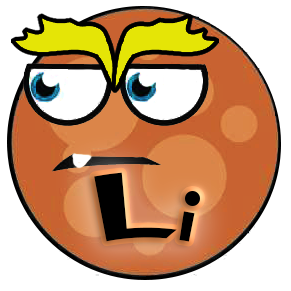
<style>
.page{position:relative;width:291px;height:291px;background:#ffffff}
.page>*{position:absolute;margin:0}
.t1{font:94px "ROGFonts-Regular";color:#000000}
.t2{font:41px "ROGFonts-Regular";color:#000000}
</style>
<div class="page">
<p class="t1" style="left:94px;top:172px;width:101px;height:70px">L<span class="t2">i</span></p>
</div>
